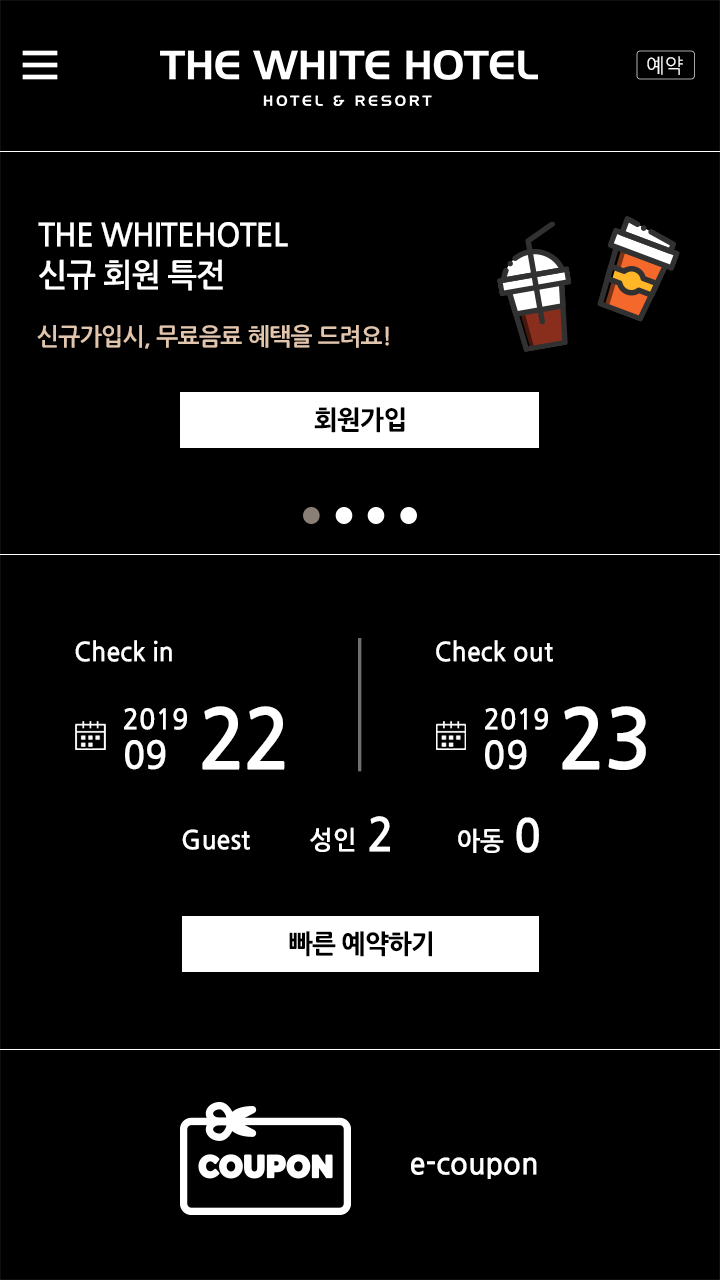
<style>
.page{position:relative;width:720px;height:1280px;background:#000000}
.page>*{position:absolute;margin:0}
.t1{font:20px "NanumGothic";color:#ffffff}
.t2{font:32px/40px "NanumGothicBold";letter-spacing:-0.03em;color:#ffffff}
.t3{font:24px "NanumGothicBold";letter-spacing:-0.03em;color:#e2c5ad}
.t4{font:26px "NanumGothicExtraBold";letter-spacing:-0.03em;color:#000000}
.t5{font:26px "NanumGothicBold";color:#ffffff}
.t6{font:28px/38.7px "NanumGothicBold";color:#ffffff}
.t7{font:38px/38.7px "NanumGothicBold";color:#ffffff}
.t8{font:82px "NanumGothicBold";letter-spacing:-0.03em;color:#ffffff}
.t9{font:45.7px "NanumGothicBold";color:#ffffff}
.t10{font:25.8px "NanumGothicBold";color:#ffffff}
.t11{font:30px "NanumGothicBold";color:#ffffff}
</style>
<div class="page">
<p class="t1" style="left:647px;top:56px;width:36px;height:19px">예약</p>
<p class="t2" style="left:38px;top:222px;width:250px;height:69px">THE WHITEHOTEL<br>신규 회원 특전</p>
<p class="t3" style="left:37px;top:324px;width:352px;height:25px">신규가입시, 무료음료 혜택을 드려요!</p>
<p class="t4" style="left:314px;top:407px;width:91px;height:26px">회원가입</p>
<p class="t5" style="left:75px;top:640px;width:97px;height:22px">Check in</p>
<p class="t5" style="left:436px;top:640px;width:117px;height:22px">Check out</p>
<p class="t6" style="left:124px;top:708px;width:63px;height:62px">2019<br><span class="t7">09</span></p>
<p class="t8" style="left:202px;top:706px;width:83px;height:64px">22</p>
<p class="t6" style="left:485px;top:708px;width:63px;height:62px">2019<br><span class="t7">09</span></p>
<p class="t8" style="left:562px;top:706px;width:84px;height:64px">23</p>
<p class="t9" style="left:369px;top:816px;width:21px;height:36px">2</p>
<p class="t9" style="left:516px;top:817px;width:23px;height:36px">0</p>
<p class="t10" style="left:182px;top:829px;width:68px;height:21px">Guest</p>
<p class="t10" style="left:310px;top:827px;width:45px;height:25px">성인</p>
<p class="t10" style="left:458px;top:828px;width:46px;height:25px">아동</p>
<p class="t4" style="left:289px;top:931px;width:143px;height:26px">빠른 예약하기</p>
<p class="t11" style="left:411px;top:1157px;width:126px;height:22px">e-coupon</p>
</div>
